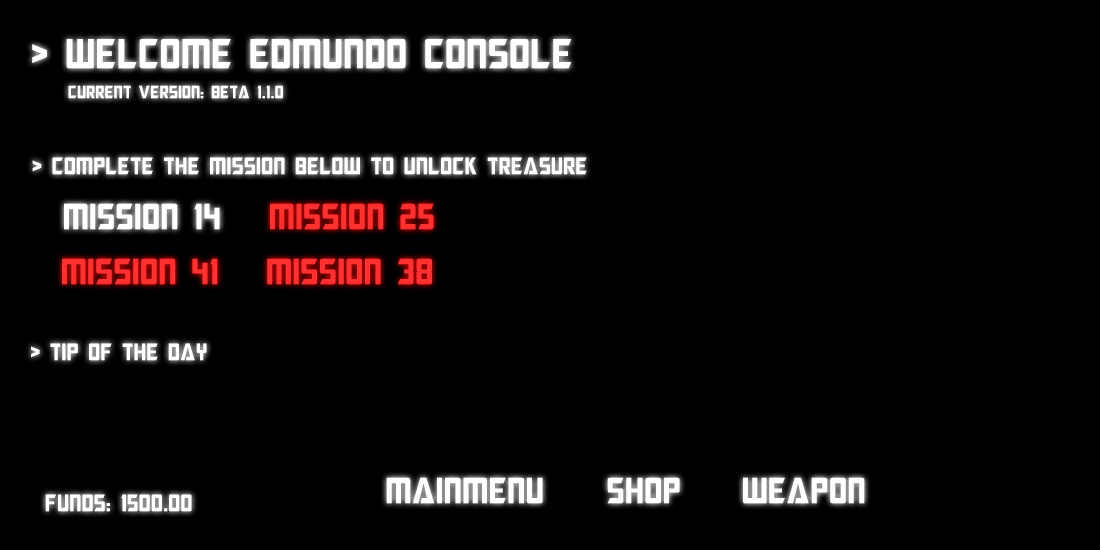
<style>
.page{position:relative;width:1100px;height:550px;background:#000000}
.page>*{position:absolute;margin:0}
.t1{font:42px "MegatronCondensed";color:#ffffff}
.t2{font:18px "MegatronCondensed";color:#ffffff}
.t3{font:24px "MegatronCondensed";color:#ffffff}
.t4{font:36.5px "MegatronCondensed";color:#ffffff}
.t5{font:36.5px "MegatronCondensed";color:#ff3030}
</style>
<div class="page">
<p class="t1" style="left:32px;top:39px;width:540px;height:30px">&gt; welcome edmundo console</p>
<p class="t2" style="left:68px;top:85px;width:215px;height:14px">current version: beta 1.1.0</p>
<p class="t3" style="left:32px;top:157px;width:555px;height:18px">&gt; complete the mission below to unlock treasure</p>
<p class="t4" style="left:64px;top:203px;width:156px;height:27px">mission 14</p>
<p class="t5" style="left:270px;top:203px;width:164px;height:27px">mission 25</p>
<p class="t5" style="left:62px;top:258px;width:156px;height:27px">mission 41</p>
<p class="t5" style="left:267px;top:258px;width:165px;height:27px">mission 38</p>
<p class="t3" style="left:31px;top:343px;width:176px;height:18px">&gt; tip of the day</p>
<p class="t4" style="left:386px;top:477px;width:157px;height:27px">mainmenu</p>
<p class="t4" style="left:607px;top:477px;width:73px;height:27px">Shop</p>
<p class="t4" style="left:743px;top:477px;width:122px;height:27px">weapon</p>
<p class="t3" style="left:45px;top:494px;width:147px;height:18px">funds: 1500.00</p>
</div>
